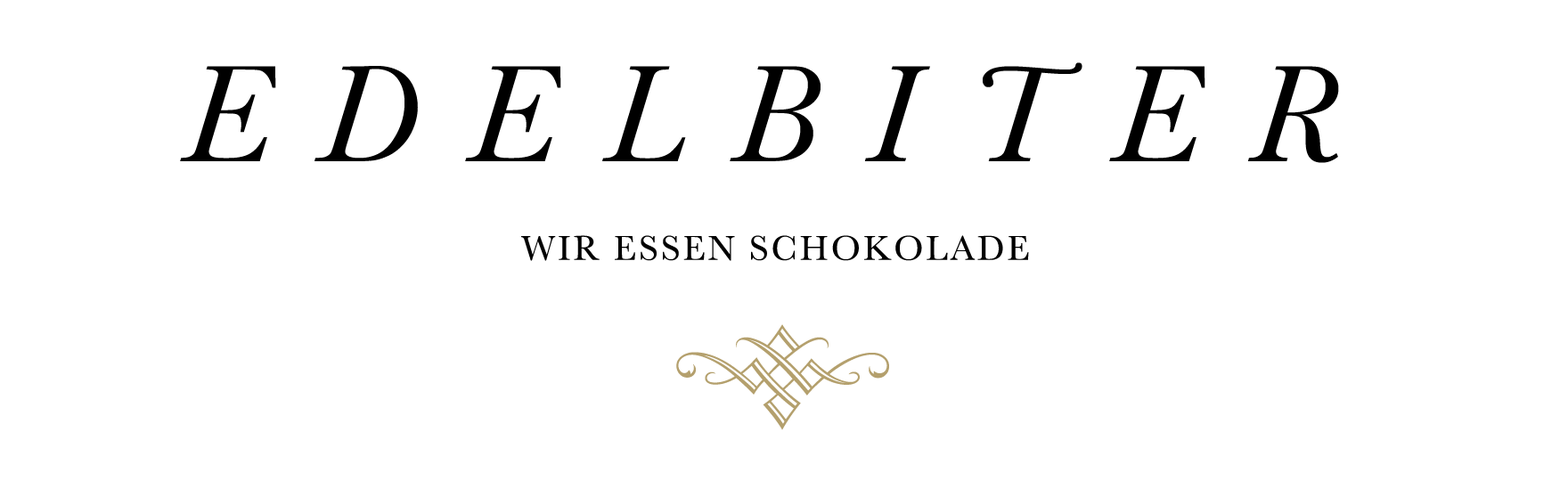
<style>
.page{position:relative;width:1568px;height:481px;background:#ffffff}
.page>*{position:absolute;margin:0}
.t1{font:143.2px "Baskerville-Italic";letter-spacing:0.35em;color:#000000;font-variant:small-caps}
.t2{font:35.8px "Baskerville";letter-spacing:0.075em;color:#000000}
.t3{font:143.2px "TypeEmbellishmentsOneLetPlain";letter-spacing:0.35em;color:#b4a06d;font-variant:small-caps}
</style>
<div class="page">
<p class="t1" style="left:180px;top:62px;width:1159px;height:101px">EDELBITER</p>
<p class="t2" style="left:521px;top:235px;width:508px;height:26px">WIR ESSEN SCHOKOLADE</p>
<p class="t3" style="left:676px;top:324px;width:213px;height:106px">8</p>
</div>
